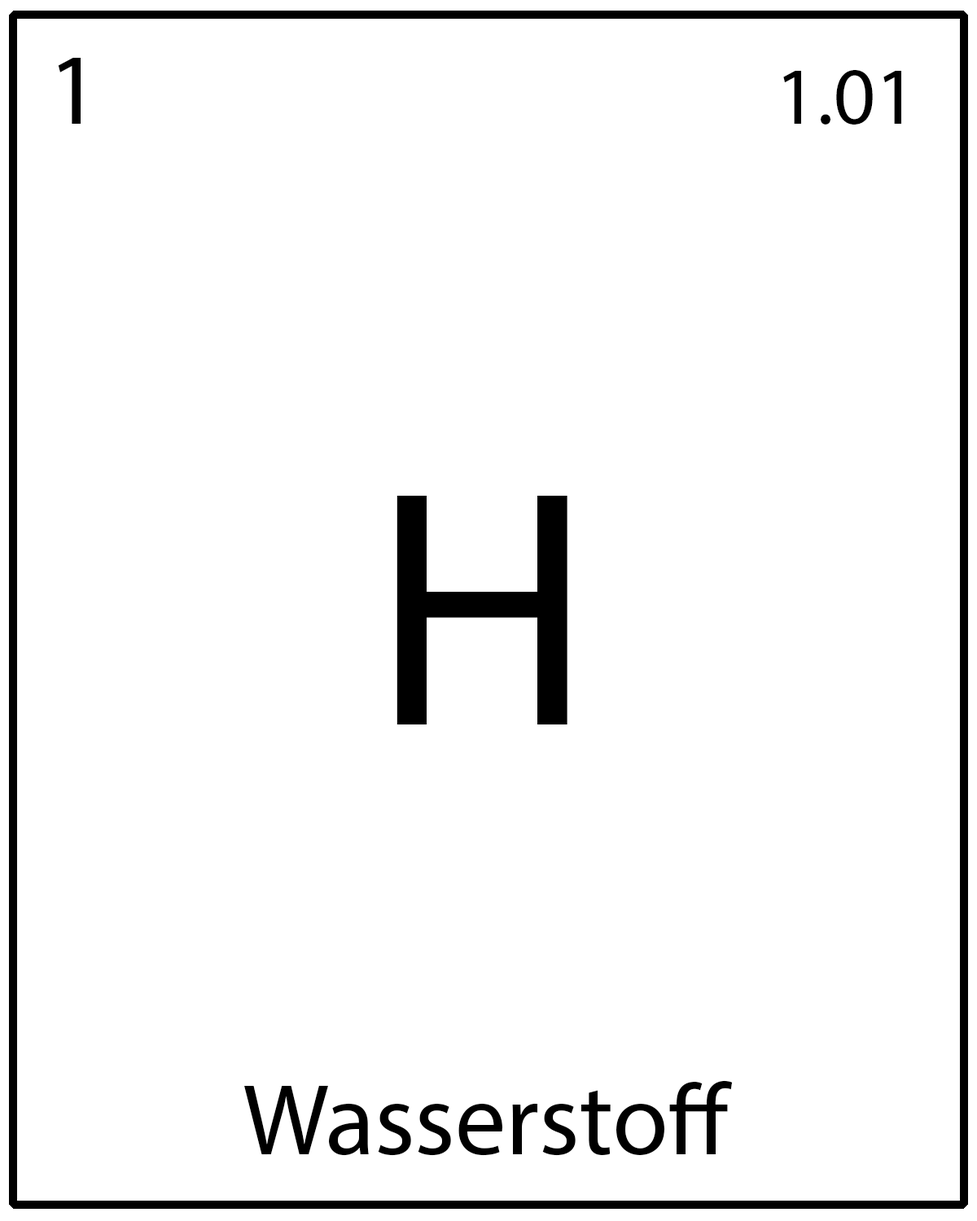
<style>
.page{position:relative;width:977px;height:1221px;background:#ffffff}
.page>*{position:absolute;margin:0}
.t1{font:101.7px "MyriadPro-Regular";color:#000000}
.t2{font:81.4px "MyriadPro-Regular";color:#000000}
.t3{font:339.1px "MyriadPro-Regular";color:#000000}
</style>
<div class="page">
<p class="t1" style="left:58px;top:58px;width:23px;height:66px">1</p>
<p class="t2" style="left:783px;top:70px;width:118px;height:55px">1.01</p>
<p class="t3" style="left:396px;top:496px;width:171px;height:228px">H</p>
<p class="t1" style="left:244px;top:1080px;width:488px;height:76px">Wasserstoff</p>
</div>
